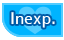
<style>
.page{position:relative;width:64px;height:40px;background:#00b4ff}
.page>*{position:absolute;margin:0}
.t1{font:16px "JK-Gothic-M";color:#ffffff}
</style>
<div class="page">
<p class="t1" style="left:11px;top:12px;width:44px;height:16px">Inexp.</p>
</div>
